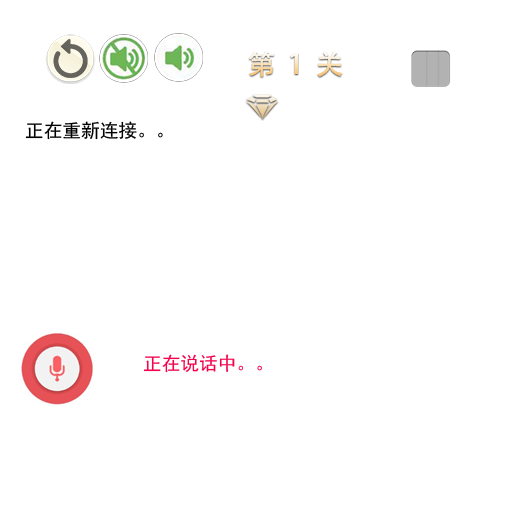
<style>
.page{position:relative;width:512px;height:512px;background:#ffffff}
.page>*{position:absolute;margin:0}
.t1{font:18.7px "SimHei";color:#000000}
.t2{font:18.7px "SimHei";color:#f4024c}
</style>
<div class="page">
<p class="t1" style="left:25px;top:121px;width:138px;height:19px">正在重新连接。。</p>
<p class="t2" style="left:143px;top:354px;width:119px;height:19px">正在说话中。。</p>
</div>
